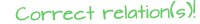
<style>
.page{position:relative;width:200px;height:24px;background:#ffffff}
.page>*{position:absolute;margin:0}
.t1{font:16px "ArchitectsDaughter";color:#66cc66}
</style>
<div class="page">
<p class="t1" style="left:15px;top:0px;width:181px;height:21px">Correct relation(s)!</p>
</div>
